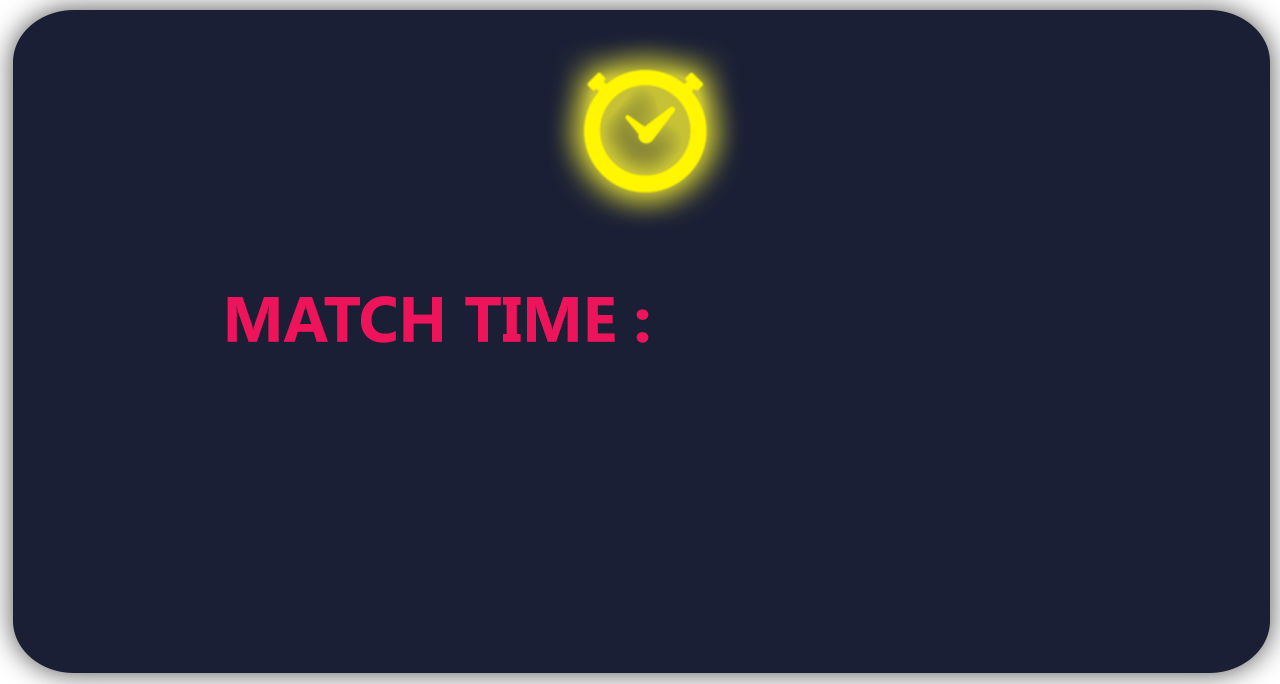
<style>
.page{position:relative;width:1280px;height:684px;background:#1a1f35}
.page>*{position:absolute;margin:0}
.t1{font:63.9px "SegoeUI-Bold";color:#ed145b}
</style>
<div class="page">
<p class="t1" style="left:227px;top:296px;width:422px;height:47px">MATCH TIME :</p>
</div>
